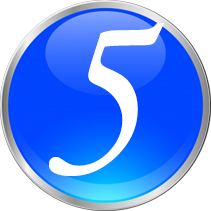
<style>
.page{position:relative;width:211px;height:211px;background:#ffffff}
.page>*{position:absolute;margin:0}
.t1{font:250px "MonotypeCorsiva";color:#ffffff}
</style>
<div class="page">
<p class="t1" style="left:49px;top:23px;width:115px;height:153px">5</p>
</div>
